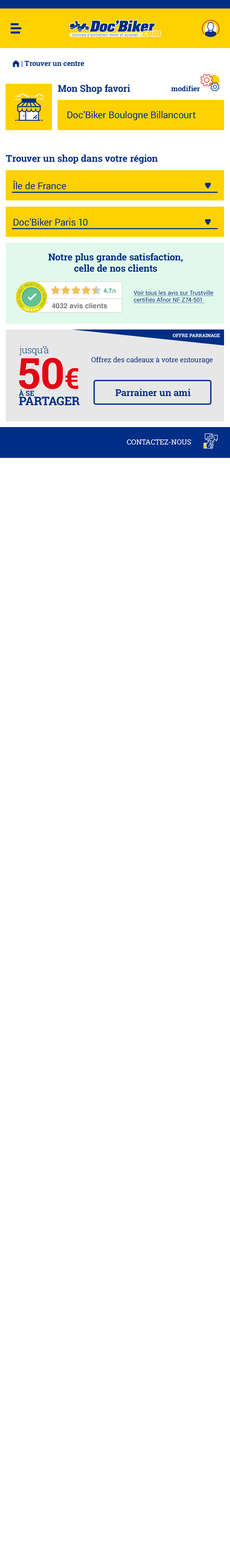
<style>
.page{position:relative;width:230px;height:1568px;background:#ffffff}
.page>*{position:absolute;margin:0}
.t1{font:7.1px "RobotoSlab-Bold";color:#002e86}
.t2{font:7.1px "FoundationIconsGeneral-Reg";color:#002e86}
.t3{font:9.5px "RobotoSlab-Bold";color:#002e86}
.t4{font:9.5px "Roboto-Regular";color:#002e86}
.t5{font:5.9px "Roboto-Regular";color:#002e86;text-decoration:underline}
.t6{font:7.1px "Helvetica-Bold";color:#7a7a7a}
.t7{font:4.7px "RobotoSlab-Bold";color:#ffffff;text-transform:uppercase}
.t8{font:9.5px "RobotoSlab-Light";color:#002e86}
.t9{font:42.6px "RobotoSlab-Bold";color:#e30613}
.t10{font:28.4px "RobotoSlab-Bold";color:#e30613}
.t11{font:7.1px "RobotoSlab-Regular";color:#002e86}
.t12{font:11.8px/9.5px "RobotoSlab-Bold";color:#002e86;text-transform:uppercase}
.t13{font:7.1px/9.5px "RobotoSlab-Bold";color:#002e86;text-transform:uppercase}
.t14{font:7.1px "RobotoSlab-Regular";color:#ffffff;text-transform:uppercase}
</style>
<div class="page">
<p class="t1" style="left:13px;top:60px;width:71px;height:7px"><span class="t2">m </span>| Trouver un centre</p>
<p class="t3" style="left:58px;top:84px;width:72px;height:10px">Mon Shop favori</p>
<p class="t1" style="left:171px;top:86px;width:28px;height:5px">modifier</p>
<p class="t4" style="left:67px;top:111px;width:128px;height:9px">Doc’Biker Boulogne Billancourt</p>
<p class="t3" style="left:6px;top:155px;width:152px;height:9px">Trouver un shop dans votre région</p>
<p class="t4" style="left:13px;top:180px;width:53px;height:9px">Île de France</p>
<p class="t4" style="left:14px;top:218px;width:73px;height:8px">Doc’Biker Paris 10</p>
<p class="t3" style="left:48px;top:253px;width:134px;height:19px;text-align:center">Notre plus grande satisfaction,<br>celle de nos clients</p>
<p class="t5" style="left:133px;top:290px;width:80px;height:13px">Voir tous les avis sur Trustville<br>certifiés Afnor NF Z74-501</p>
<p class="t6" style="left:52px;top:303px;width:55px;height:5px">4032 avis clients</p>
<p class="t7" style="left:172px;top:334px;width:48px;height:3px">Offre parrainage</p>
<p class="t8" style="left:19px;top:346px;width:29px;height:9px">jusqu’à</p>
<p class="t9" style="left:19px;top:358px;width:59px;height:31px">50<span class="t10">€</span></p>
<p class="t11" style="left:91px;top:357px;width:121px;height:7px">Offrez des cadeaux à votre entourage</p>
<p class="t12" style="left:19px;top:389px;width:61px;height:16px"><span class="t13">à se<br></span>partager</p>
<p class="t3" style="left:115px;top:389px;width:75px;height:7px">Parrainer un ami</p>
<p class="t14" style="left:127px;top:439px;width:64px;height:6px">contactez-nous</p>
</div>
